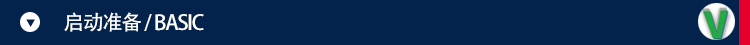
<style>
.page{position:relative;width:750px;height:45px;background:#03234c}
.page>*{position:absolute;margin:0}
.t1{font:20.5px "AdobeHeitiStd-Regular";letter-spacing:-0.06em;color:#ffffff}
</style>
<div class="page">
<p class="t1" style="left:64px;top:12px;width:140px;height:20px">启动准备 / BASIC</p>
</div>
